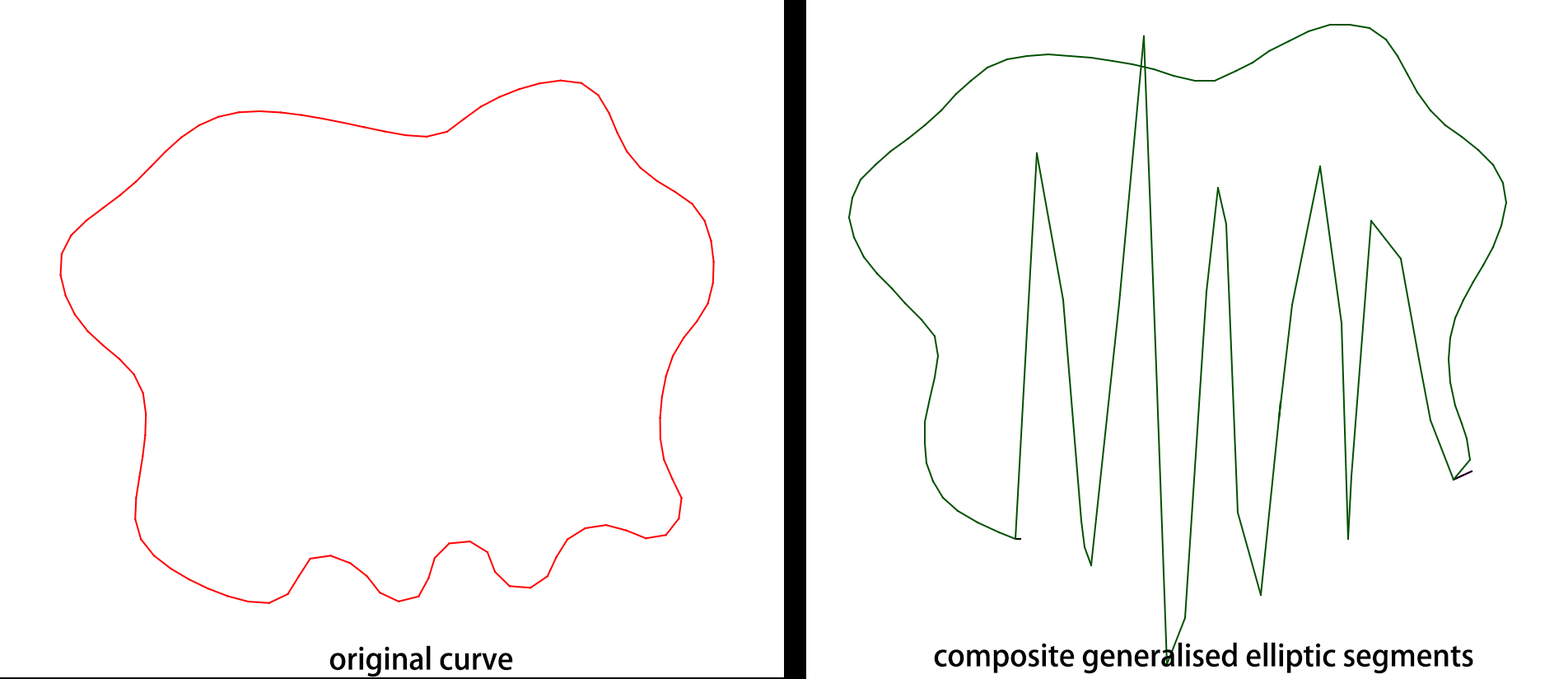
<style>
.page{position:relative;width:1568px;height:679px;background:#ffffff}
.page>*{position:absolute;margin:0}
.t1{font:29.6px "AdobeFanHeitiStd-Bold";color:#000000}
</style>
<div class="page">
<p class="t1" style="left:934px;top:642px;width:539px;height:32px">composite generalised elliptic segments</p>
<p class="t1" style="left:329px;top:645px;width:184px;height:32px">original curve</p>
</div>
